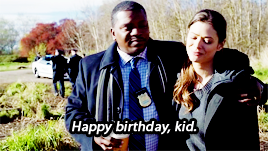
<style>
.page{position:relative;width:268px;height:151px;background:#000000}
.page>*{position:absolute;margin:0}
.t1{font:14px "MyriadPro-Regular";color:#fefeff;font-weight:bold;font-style:italic}
</style>
<div class="page">
<p class="t1" style="left:72px;top:121px;width:125px;height:14px">Happy birthday, kid.</p>
</div>
